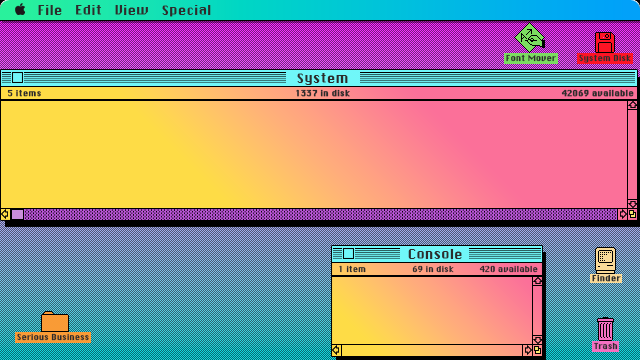
<style>
.page{position:relative;width:640px;height:360px}
.page>*{position:absolute;margin:0}
.t1{font:13px "ChicagoFLF";color:#2c2c2c}
.t2{font:8px "ChicagoFLF";color:#2c2c2c}
.t3{font:8px "ChicagoFLF";color:#2c2c2c;font-weight:bold}
</style>
<div class="page">
<p class="t1" style="left:38px;top:5px;width:173px;height:12px">File   Edit   View   Special</p>
<p class="t2" style="left:506px;top:54px;width:50px;height:8px">Font Mover</p>
<p class="t2" style="left:579px;top:54px;width:52px;height:9px">System Disk</p>
<p class="t1" style="left:297px;top:73px;width:51px;height:12px">System</p>
<p class="t3" style="left:7px;top:89px;width:34px;height:8px">5 items</p>
<p class="t3" style="left:296px;top:89px;width:54px;height:8px">1337 in disk</p>
<p class="t3" style="left:561px;top:89px;width:73px;height:8px">42069 available</p>
<p class="t1" style="left:408px;top:249px;width:54px;height:10px">Console</p>
<p class="t2" style="left:339px;top:265px;width:27px;height:8px">1 item</p>
<p class="t2" style="left:412px;top:265px;width:42px;height:8px">69 in disk</p>
<p class="t2" style="left:479px;top:265px;width:59px;height:8px">420 available</p>
<p class="t3" style="left:592px;top:274px;width:29px;height:8px">Finder</p>
<p class="t2" style="left:17px;top:333px;width:72px;height:8px">Serious Business</p>
<p class="t2" style="left:594px;top:342px;width:24px;height:8px">Trash</p>
</div>
